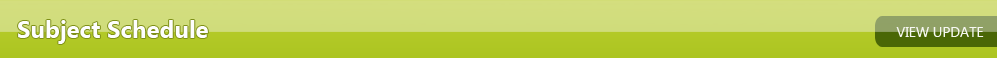
<style>
.page{position:relative;width:997px;height:58px}
.page>*{position:absolute;margin:0}
.t1{font:24px "SegoeUI-Bold";color:#fefefe}
.t2{font:14px "SegoeUI";color:#f6f7f1}
</style>
<div class="page">
<p class="t1" style="left:18px;top:20px;width:190px;height:24px">Subject Schedule</p>
<p class="t2" style="left:896px;top:27px;width:88px;height:10px">VIEW UPDATE</p>
</div>
